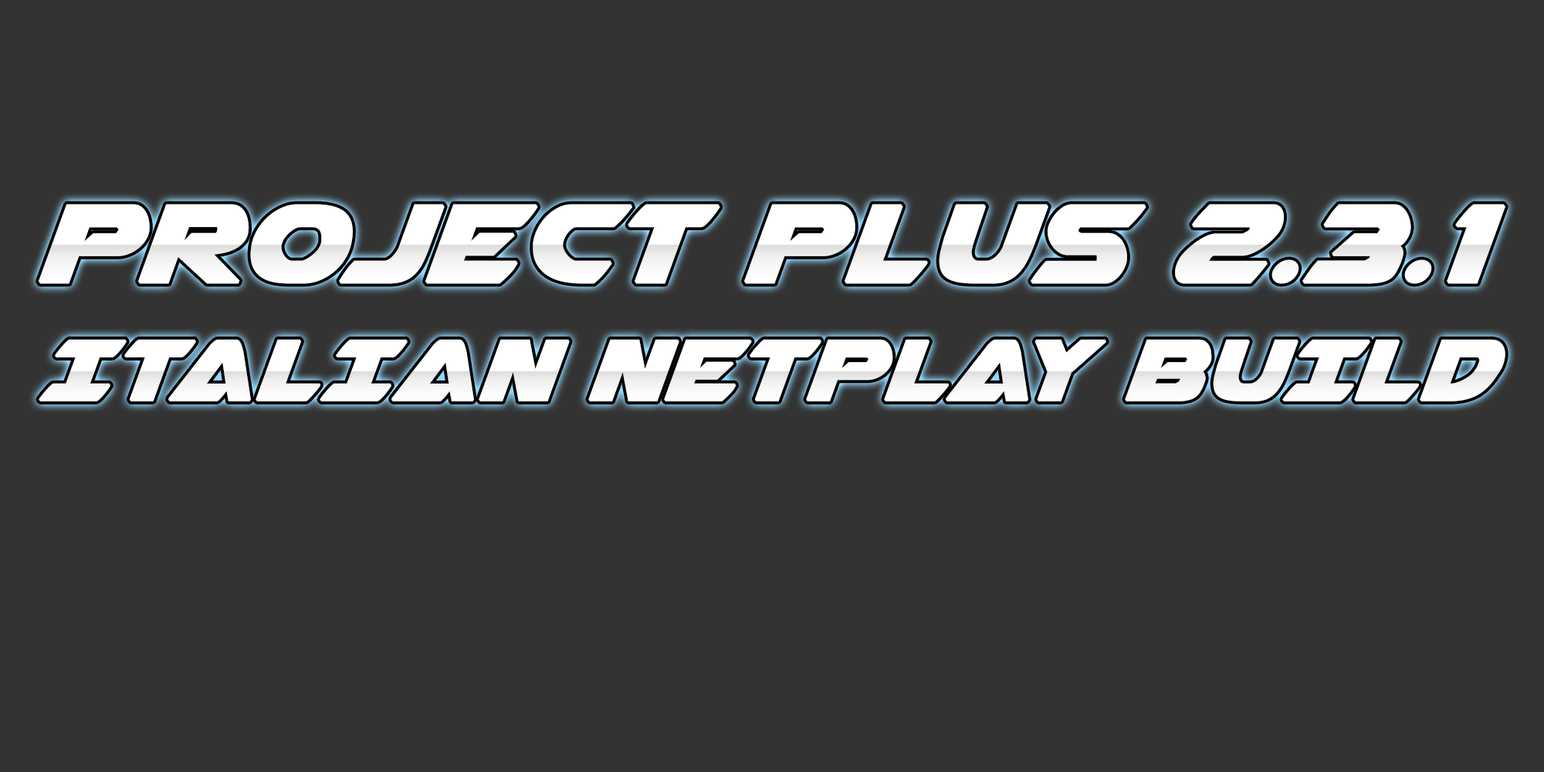
<style>
.page{position:relative;width:1544px;height:772px;background:#333333}
.page>*{position:absolute;margin:0}
.t1{font:142.7px "Airstrike";color:#ffffff;font-variant:small-caps;font-weight:bold}
.t2{font:111.1px "Airstrike";color:#ffffff;font-variant:small-caps;font-weight:bold}
</style>
<div class="page">
<p class="t1" style="left:39px;top:204px;width:1467px;height:80px">PROJECT PLUS 2.3.1</p>
<p class="t2" style="left:39px;top:339px;width:1467px;height:63px">ITALIAN NETPLAY BUILD</p>
</div>
